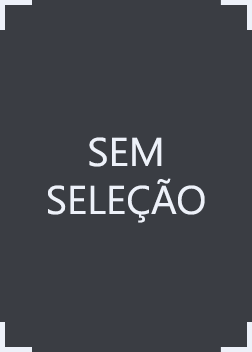
<style>
.page{position:relative;width:252px;height:352px;background:#3a3d43}
.page>*{position:absolute;margin:0}
.t1{font:40px "YuGothicUI-Regular";color:#edf1f9}
</style>
<div class="page">
<p class="t1" style="left:48px;top:137px;width:157px;height:86px;text-align:center">SEM<br>SELEÇÃO</p>
</div>
